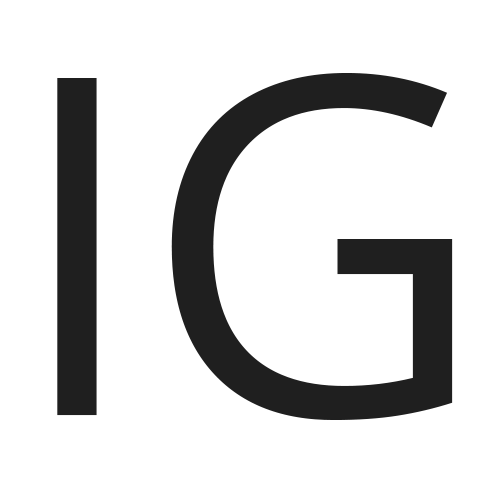
<style>
.page{position:relative;width:500px;height:500px;background:#ffffff}
.page>*{position:absolute;margin:0}
.t1{font:472.3px "OpenSans-Regular";color:#1f1f1f}
</style>
<div class="page">
<p class="t1" style="left:57px;top:73px;width:396px;height:347px">IG</p>
</div>
